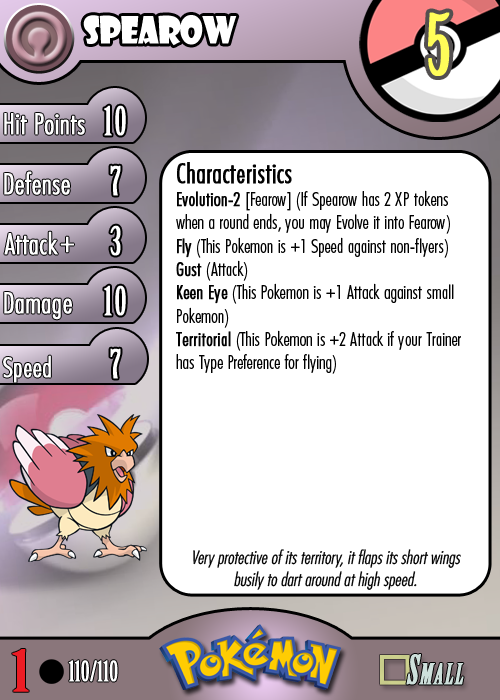
<style>
.page{position:relative;width:500px;height:700px;background:#ffffff}
.page>*{position:absolute;margin:0}
.t1{font:36.7px "ShowcardGothic-Reg";letter-spacing:-0.025em;color:#ffffff;scale:0.91 1}
.t2{font:83.3px "BirchStd";letter-spacing:0.025em;color:#fffd59;font-weight:bold}
.t3{font:27.8px "Futura-CondensedLight";color:#ffffff;font-weight:bold}
.t4{font:38.9px "BirchStd";letter-spacing:0.035em;color:#ffffff;font-weight:bold}
.t5{font:19.4px "FuturaCondensedBQ-Light";color:#010101}
.t6{font:27.8px "FuturaCondensedBQ-Light";color:#010101;font-weight:bold}
.t7{font:19.4px "FuturaCondensedBQ-Light";color:#010101;font-weight:bold}
.t8{font:30.6px "Futura-CondensedLight";color:#ffffff;font-weight:bold}
.t9{font:27.8px "FuturaCondensedBQ-Light";color:#ffffff;font-weight:bold}
.t10{font:18.1px "Futura-CondensedLight";color:#010101;font-style:italic}
.t11{font:55.6px "BirchStd";color:#ed1c24;font-weight:bold;scale:1.5 1}
.t12{font:27.8px "BirchStd";color:#ffffff;font-weight:bold}
</style>
<div class="page">
<p class="t1" style="left:83px;top:15px;width:154px;height:31px">spearow</p>
<p class="t2" style="left:428px;top:12px;width:22px;height:64px">5</p>
<p class="t3" style="left:4px;top:113px;width:81px;height:22px">Hit Points</p>
<p class="t4" style="left:104px;top:105px;width:22px;height:31px">10</p>
<p class="t3" style="left:4px;top:171px;width:66px;height:24px">Defense</p>
<p class="t4" style="left:110px;top:165px;width:11px;height:31px">7</p>
<p class="t5" style="left:176px;top:162px;width:285px;height:212px"><span class="t6">Characteristics<br></span><span class="t7">Evolution-2 </span>[Fearow] (If Spearow has 2 XP tokens when a round ends, you may Evolve it into Fearow)<br><span class="t7">Fly</span> (This Pokemon is +1 Speed against non-flyers)<br><span class="t7">Gust</span> (Attack)<br><span class="t7">Keen Eye</span> (This Pokemon is +1 Attack against small Pokemon)<br><span class="t7">Territorial</span> (This Pokemon is +2 Attack if your Trainer has Type Preference for flying)</p>
<p class="t3" style="left:4px;top:231px;width:54px;height:24px">Attack</p>
<p class="t4" style="left:110px;top:225px;width:11px;height:31px">3</p>
<p class="t8" style="left:60px;top:236px;width:14px;height:17px">+</p>
<p class="t3" style="left:4px;top:292px;width:68px;height:28px">Damage</p>
<p class="t4" style="left:104px;top:285px;width:22px;height:31px">10</p>
<p class="t4" style="left:110px;top:348px;width:11px;height:31px">7</p>
<p class="t9" style="left:3px;top:355px;width:48px;height:28px">Speed</p>
<p class="t10" style="left:193px;top:549px;width:268px;height:41px;text-align:center">Very protective of its territory, it flaps its short wings busily to dart around at high speed.</p>
<p class="t11" style="left:12px;top:649px;width:17px;height:43px">1</p>
<p class="t12" style="left:68px;top:660px;width:50px;height:22px">110/110</p>
</div>
